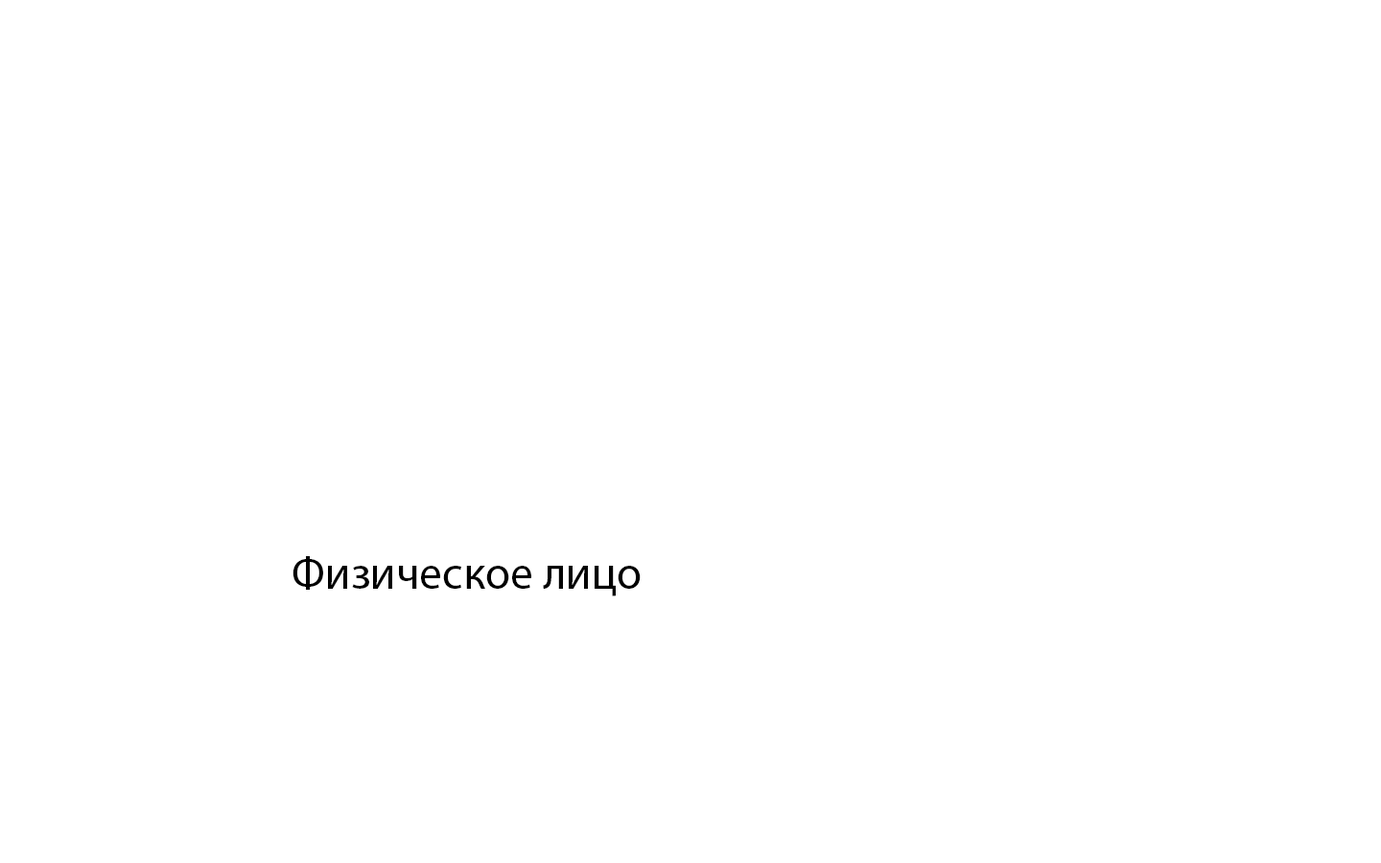
<style>
.page{position:relative;width:1381px;height:863px;background:#ffffff}
.page>*{position:absolute;margin:0}
.t1{font:46px "MyriadPro-Regular";color:#000000}
</style>
<div class="page">
<p class="t1" style="left:293px;top:556px;width:348px;height:41px">Физическое лицо</p>
</div>
